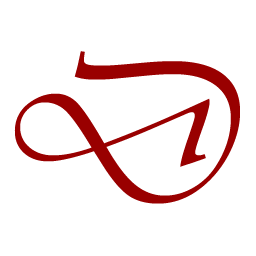
<style>
.page{position:relative;width:256px;height:256px;background:#ffffff}
.page>*{position:absolute;margin:0}
.t1{font:212px "Vivaldii";color:#990000}
</style>
<div class="page">
<p class="t1" style="left:14px;top:51px;width:226px;height:153px">D</p>
</div>
